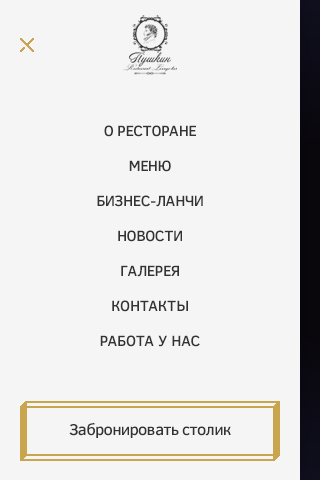
<style>
.page{position:relative;width:320px;height:480px;background:#f5f5f5}
.page>*{position:absolute;margin:0}
.t1{font:15px "ClearSans-Medium";letter-spacing:-0.025em;color:#333333}
.t2{font:15px "ClearSans-Medium";letter-spacing:-0.06em;color:#333333}
.t3{font:15px "ClearSans-Medium";color:#333333}
.t4{font:15px "ClearSans-Medium";letter-spacing:-0.05em;color:#333333}
.t5{font:15px "ClearSans-Medium";letter-spacing:0.025em;color:#333333}
.t6{font:15px "ClearSans-Medium";letter-spacing:-0.075em;color:#333333}
.t7{font:16px "ClearSans-Medium";letter-spacing:-0.025em;color:#333333}
.t8{font:16px "ClearSans-Medium";color:#333333}
</style>
<div class="page">
<p class="t1" style="left:104px;top:125px;width:92px;height:12px">О РЕСТО<span class="t2">Р</span>АНЕ</p>
<p class="t1" style="left:129px;top:160px;width:42px;height:12px">МЕНЮ</p>
<p class="t1" style="left:97px;top:195px;width:106px;height:12px">БИЗН<span class="t3">Е</span>С-ЛА<span class="t3">Н</span>ЧИ</p>
<p class="t1" style="left:118px;top:230px;width:64px;height:12px">НО<span class="t3">В</span>ОСТИ</p>
<p class="t1" style="left:121px;top:265px;width:58px;height:12px">ГАЛЕР<span class="t3">Е</span>Я</p>
<p class="t3" style="left:112px;top:300px;width:76px;height:12px">КОН<span class="t4">Т</span><span class="t1">А</span><span class="t5">К</span>Т<span class="t1">Ы</span></p>
<p class="t3" style="left:100px;top:335px;width:100px;height:12px"><span class="t6">Р</span><span class="t1">А</span>БО<span class="t4">Т</span>А У Н<span class="t4">А</span>С</p>
<p class="t7" style="left:69px;top:423px;width:162px;height:15px">Забронирова<span class="t8">т</span>ь <span class="t8">ст</span>олик</p>
</div>
